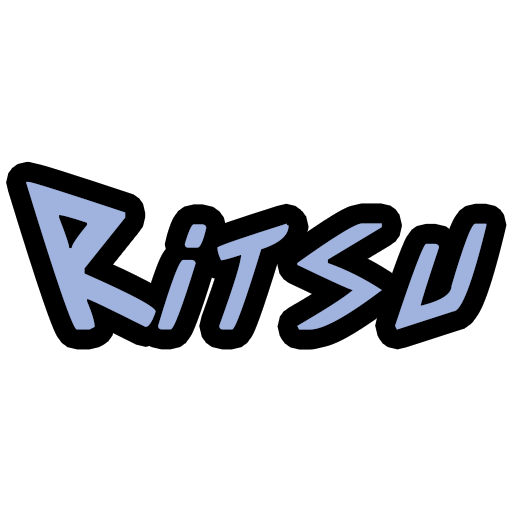
<style>
.page{position:relative;width:512px;height:512px;background:#ffffff}
.page>*{position:absolute;margin:0}
.t1{font:210px "Patapon-Regular";color:#a0b3de}
</style>
<div class="page">
<p class="t1" style="left:26px;top:181px;width:461px;height:149px">Ritsu</p>
</div>
